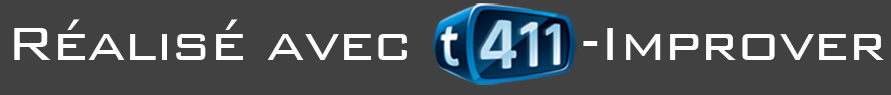
<style>
.page{position:relative;width:891px;height:95px;background:#414141}
.page>*{position:absolute;margin:0}
.t1{font:62.4px "BankGothic-Light";letter-spacing:-0.025em;color:#ffffff}
</style>
<div class="page">
<p class="t1" style="left:14px;top:19px;width:393px;height:41px">Réalisé avec</p>
<p class="t1" style="left:583px;top:28px;width:301px;height:32px">-Improver</p>
</div>
